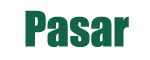
<style>
.page{position:relative;width:150px;height:60px;background:#ffffff}
.page>*{position:absolute;margin:0}
.t1{font:45px "Impact";color:#116544}
</style>
<div class="page">
<p class="t1" style="left:25px;top:10px;width:104px;height:37px">Pasar</p>
</div>
